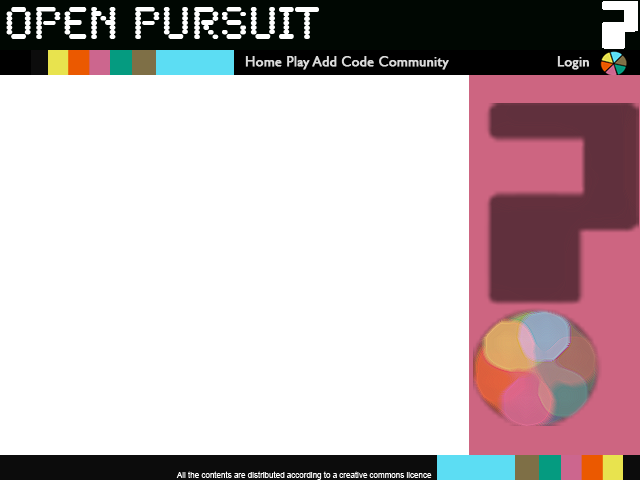
<style>
.page{position:relative;width:640px;height:480px;background:#ffffff}
.page>*{position:absolute;margin:0}
.t1{font:48px "SynchroLET";color:#ffffff}
.t2{font:14px "GillSans";color:#dadada;font-weight:bold}
.t3{font:8px "ArialMT";color:#ffffff}
</style>
<div class="page">
<p class="t1" style="left:6px;top:7px;width:313px;height:32px">Open Pursuit</p>
<p class="t2" style="left:245px;top:56px;width:204px;height:14px">Home Play Add Code Community</p>
<p class="t2" style="left:557px;top:56px;width:32px;height:14px">Login</p>
<p class="t3" style="left:176px;top:471px;width:256px;height:9px">All the contents are distributed according to a creative commons licence</p>
</div>
